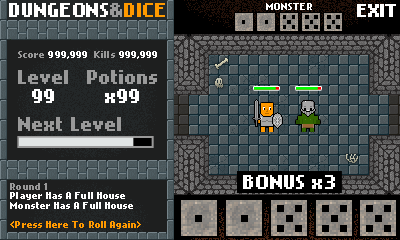
<style>
.page{position:relative;width:400px;height:240px}
.page>*{position:absolute;margin:0}
.t1{font:16px "NokiaCellphoneFC-Small";text-transform:uppercase}
.t2{font:16px "NokiaCellphoneFC-Small";color:#ffffff;text-transform:uppercase}
.t3{font:16px "NokiaCellphoneFC-Small";color:#999999;text-transform:uppercase}
.t4{font:16px "NokiaCellphoneFC-Small";color:#ff9900;text-transform:uppercase}
.t5{font:8px "NokiaCellphoneFC-Small";letter-spacing:0.01em;color:#ffffff}
.t6{font:15.4px "NokiaCellphoneFC-Small";letter-spacing:-0.075em;color:#ffffff;text-transform:uppercase}
.t7{font:8px "NokiaCellphoneFC-Small";letter-spacing:0.01em;color:#999999}
.t8{font:16px "NokiaCellphoneFC-Small";letter-spacing:0.01em;color:#999999}
.t9{font:16px "NokiaCellphoneFC-Small";letter-spacing:0.01em;color:#ffffff}
.t10{font:8px "NokiaCellphoneFC-Small";letter-spacing:0.01em;color:#ff9900}
</style>
<div class="page">
<p class="t1" style="left:9px;top:3px;width:156px;height:14px">DUNGEONs&amp;DICE</p>
<p class="t2" style="left:9px;top:3px;width:156px;height:14px">DUNGEONs<span class="t3">&amp;</span><span class="t4">DICE</span></p>
<p class="t5" style="left:266px;top:3px;width:46px;height:7px">MONSTER</p>
<p class="t6" style="left:357px;top:4px;width:39px;height:13px">EXIT</p>
<p class="t5" style="left:18px;top:51px;width:139px;height:8px"><span class="t7">Score </span>999,999  <span class="t7">Kills </span>999,999</p>
<p class="t8" style="left:18px;top:70px;width:50px;height:33px;text-align:center">Level<br><span class="t9">99</span></p>
<p class="t8" style="left:87px;top:70px;width:70px;height:33px;text-align:center">Potions<br><span class="t9">x99</span></p>
<p class="t8" style="left:18px;top:117px;width:103px;height:14px">Next Level</p>
<p class="t5" style="left:10px;top:183px;width:131px;height:46px"><span class="t7">Round 1<br></span>Player Has A Full House<br>Monster Has A Full House<br><br><span class="t10">&lt;Press Here To Roll Again&gt;</span></p>
<p class="t9" style="left:243px;top:175px;width:92px;height:14px">BONUS x3</p>
</div>
